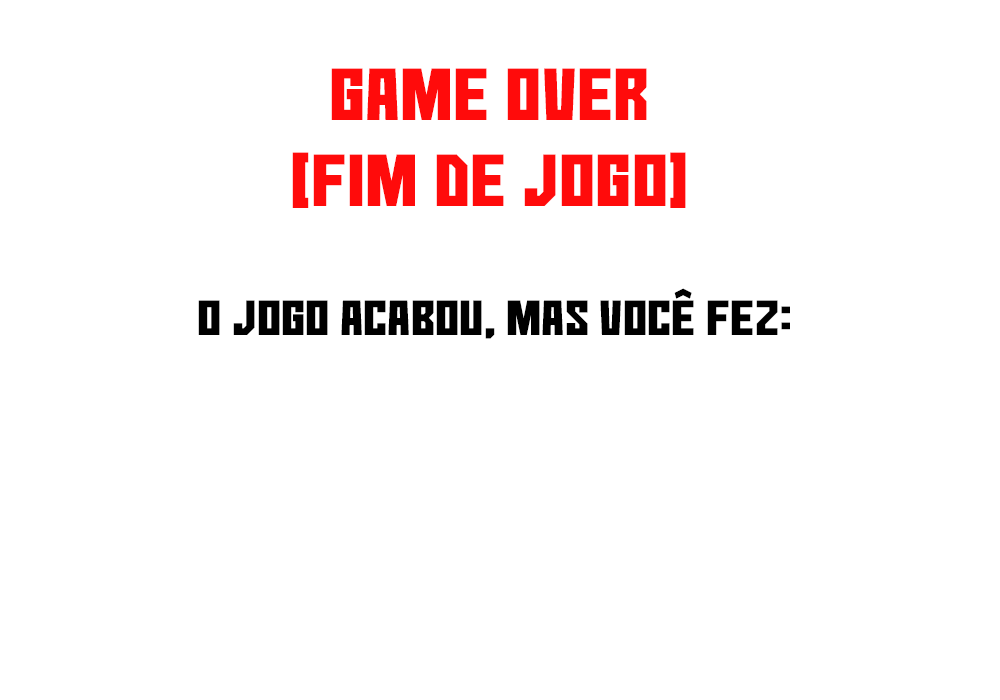
<style>
.page{position:relative;width:1000px;height:700px;background:#ffffff}
.page>*{position:absolute;margin:0}
.t1{font:72px "AkaashNormal";color:#ff0b0b}
.t2{font:48px "AkaashNormal";color:#000000}
</style>
<div class="page">
<p class="t1" style="left:292px;top:68px;width:394px;height:140px;text-align:center">GAME OVER <br>(FIM DE JOGO)</p>
<p class="t2" style="left:198px;top:288px;width:592px;height:51px">O jogo acabou, mas você fez:</p>
</div>
